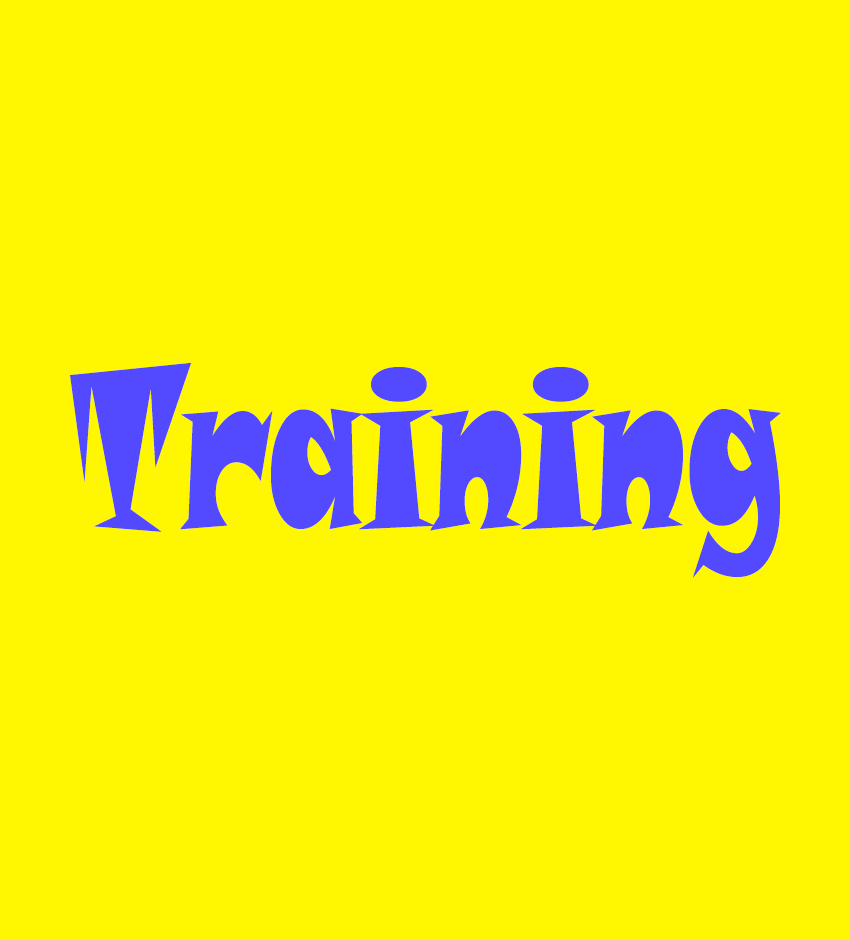
<style>
.page{position:relative;width:850px;height:940px;background:#fff601}
.page>*{position:absolute;margin:0}
.t1{font:225px "SnapITC-Regular";color:#534aff;scale:0.67 1}
</style>
<div class="page">
<p class="t1" style="left:70px;top:362px;width:711px;height:216px">Training</p>
</div>
